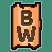
<style>
.page{position:relative;width:52px;height:52px;background:#448e78}
.page>*{position:absolute;margin:0}
.t1{font:24px/16px "Baloo2-Bold";color:#573f2e}
</style>
<div class="page">
<p class="t1" style="left:17px;top:11px;width:19px;height:31px;text-align:center">B<br>W</p>
</div>
